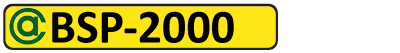
<style>
.page{position:relative;width:400px;height:53px;background:#ffffff}
.page>*{position:absolute;margin:0}
.t1{font:48px "Calibri-Bold";color:#000000}
</style>
<div class="page">
<p class="t1" style="left:52px;top:11px;width:182px;height:32px">BSP-2000</p>
</div>
